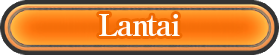
<style>
.page{position:relative;width:279px;height:55px}
.page>*{position:absolute;margin:0}
.t1{font:30px "RyuminPro-ExBold";letter-spacing:-0.08em;color:#fffff7}
</style>
<div class="page">
<p class="t1" style="left:99px;top:14px;width:81px;height:22px">Lantai</p>
</div>
